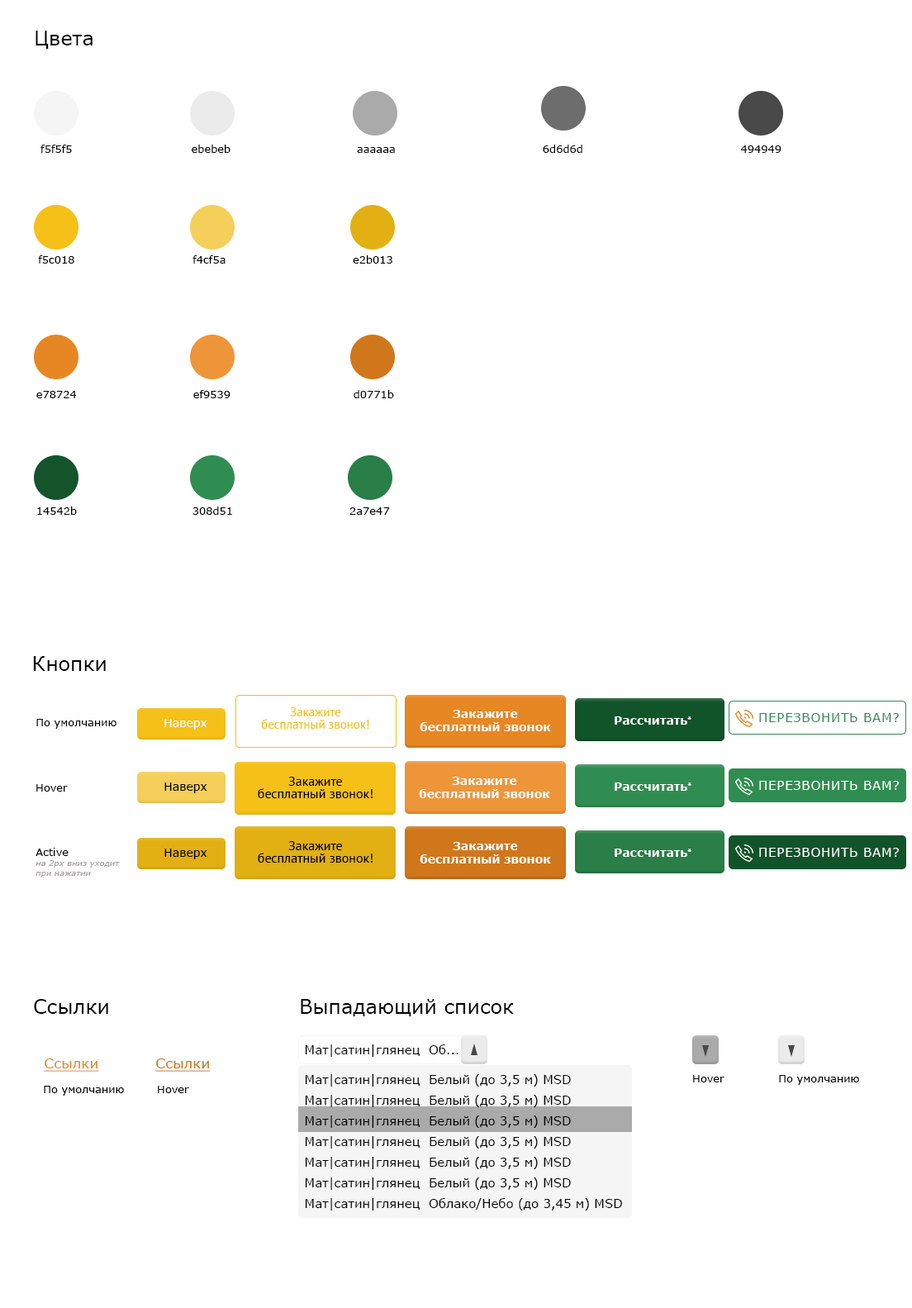
<style>
.page{position:relative;width:912px;height:1308px;background:#ffffff}
.page>*{position:absolute;margin:0}
.t1{font:19.8px "Verdana";color:#000000}
.t2{font:10.7px "Verdana";color:#000000}
.t3{font:12.4px/12.4px "PTSans-Regular";color:#f5c018}
.t4{font:11.6px/13.2px "Verdana-Bold";color:#ffffff}
.t5{font:12.4px "Verdana";letter-spacing:0.05em;color:#308d51;text-transform:uppercase}
.t6{font:11.6px "Verdana";color:#ffffff}
.t7{font:11.6px "Verdana-Bold";color:#ffffff}
.t8{font:11.6px "PTSans-Regular";color:#ffffff}
.t9{font:11.6px "Verdana";color:#000000}
.t10{font:13.2px/12.4px "PTSans-Regular";color:#000000}
.t11{font:12.4px "Verdana";letter-spacing:0.05em;color:#fefefe;text-transform:uppercase}
.t12{font:8.3px/9.9px "Verdana-Italic";color:#a9a2a2}
.t13{font:10.7px/13.2px "Verdana";color:#000000}
.t14{font:12.4px "Verdana";color:#000000}
.t15{font:14px "Verdana";color:#e78724;text-decoration:underline}
.t16{font:14px "Verdana";color:#d0771b;text-decoration:underline}
.t17{font:12.4px/16.5px "Verdana";color:#000000}
</style>
<div class="page">
<p class="t1" style="left:36px;top:31px;width:57px;height:18px">Цвета</p>
<p class="t2" style="left:40px;top:145px;width:32px;height:8px">f5f5f5</p>
<p class="t2" style="left:192px;top:145px;width:38px;height:8px">ebebeb</p>
<p class="t2" style="left:357px;top:147px;width:38px;height:6px">aaaaaa</p>
<p class="t2" style="left:543px;top:145px;width:39px;height:8px">6d6d6d</p>
<p class="t2" style="left:740px;top:145px;width:41px;height:8px">494949</p>
<p class="t2" style="left:38px;top:255px;width:36px;height:9px">f5c018</p>
<p class="t2" style="left:192px;top:255px;width:34px;height:9px">f4cf5a</p>
<p class="t2" style="left:353px;top:255px;width:39px;height:9px">e2b013</p>
<p class="t2" style="left:193px;top:390px;width:37px;height:8px">ef9539</p>
<p class="t2" style="left:354px;top:390px;width:40px;height:8px">d0771b</p>
<p class="t2" style="left:36px;top:391px;width:41px;height:7px">e78724</p>
<p class="t2" style="left:37px;top:506px;width:40px;height:9px">14542b</p>
<p class="t2" style="left:192px;top:506px;width:40px;height:9px">308d51</p>
<p class="t2" style="left:349px;top:507px;width:41px;height:8px">2a7e47</p>
<p class="t1" style="left:33px;top:656px;width:73px;height:15px">Кнопки</p>
<p class="t3" style="left:261px;top:707px;width:108px;height:22px;text-align:center">Закажите<br>бесплатный звонок!</p>
<p class="t4" style="left:420px;top:710px;width:131px;height:21px;text-align:center">Закажите<br>бесплатный звонок</p>
<p class="t5" style="left:759px;top:713px;width:140px;height:9px">перезвонить вам?</p>
<p class="t2" style="left:36px;top:719px;width:80px;height:10px">По умолчанию</p>
<p class="t6" style="left:164px;top:719px;width:43px;height:10px">Наверх</p>
<p class="t7" style="left:615px;top:716px;width:76px;height:8px">Рассчитать<span class="t8">*</span></p>
<p class="t2" style="left:36px;top:784px;width:32px;height:7px">Hover</p>
<p class="t9" style="left:164px;top:782px;width:43px;height:11px">Наверх</p>
<p class="t10" style="left:258px;top:776px;width:115px;height:22px;text-align:center">Закажите<br>бесплатный звонок!</p>
<p class="t4" style="left:419px;top:776px;width:131px;height:22px;text-align:center">Закажите<br>бесплатный звонок</p>
<p class="t7" style="left:615px;top:782px;width:76px;height:9px">Рассчитать<span class="t8">*</span></p>
<p class="t11" style="left:759px;top:781px;width:140px;height:9px">перезвонить вам?</p>
<p class="t10" style="left:258px;top:841px;width:115px;height:21px;text-align:center">Закажите<br>бесплатный звонок!</p>
<p class="t4" style="left:420px;top:842px;width:131px;height:21px;text-align:center">Закажите<br>бесплатный звонок</p>
<p class="t12" style="left:36px;top:847px;width:84px;height:30px"><span class="t13">Active<br></span>на 2px вниз уходит<br>при нажатии</p>
<p class="t9" style="left:164px;top:848px;width:43px;height:11px">Наверх</p>
<p class="t7" style="left:615px;top:848px;width:76px;height:9px">Рассчитать<span class="t8">*</span></p>
<p class="t11" style="left:759px;top:847px;width:140px;height:10px">перезвонить вам?</p>
<p class="t1" style="left:34px;top:999px;width:74px;height:15px">Ссылки</p>
<p class="t1" style="left:301px;top:999px;width:213px;height:17px">Выпадающий список</p>
<p class="t14" style="left:305px;top:1044px;width:153px;height:12px">Мат|сатин|глянец  Об...</p>
<p class="t15" style="left:44px;top:1058px;width:55px;height:13px">Ссылки</p>
<p class="t16" style="left:155px;top:1058px;width:56px;height:13px">Ссылки</p>
<p class="t17" style="left:305px;top:1074px;width:317px;height:136px">Мат|сатин|глянец  Белый (до 3,5 м) MSD<br>Мат|сатин|глянец  Белый (до 3,5 м) MSD<br>Мат|сатин|глянец  Белый (до 3,5 м) MSD<br>Мат|сатин|глянец  Белый (до 3,5 м) MSD<br>Мат|сатин|глянец  Белый (до 3,5 м) MSD<br>Мат|сатин|глянец  Белый (до 3,5 м) MSD<br>Мат|сатин|глянец  Облако/Небо (до 3,45 м) MSD</p>
<p class="t2" style="left:44px;top:1085px;width:80px;height:10px">По умолчанию</p>
<p class="t2" style="left:158px;top:1085px;width:31px;height:8px">Hover</p>
<p class="t2" style="left:693px;top:1075px;width:31px;height:7px">Hover</p>
<p class="t2" style="left:779px;top:1075px;width:80px;height:10px">По умолчанию</p>
</div>
